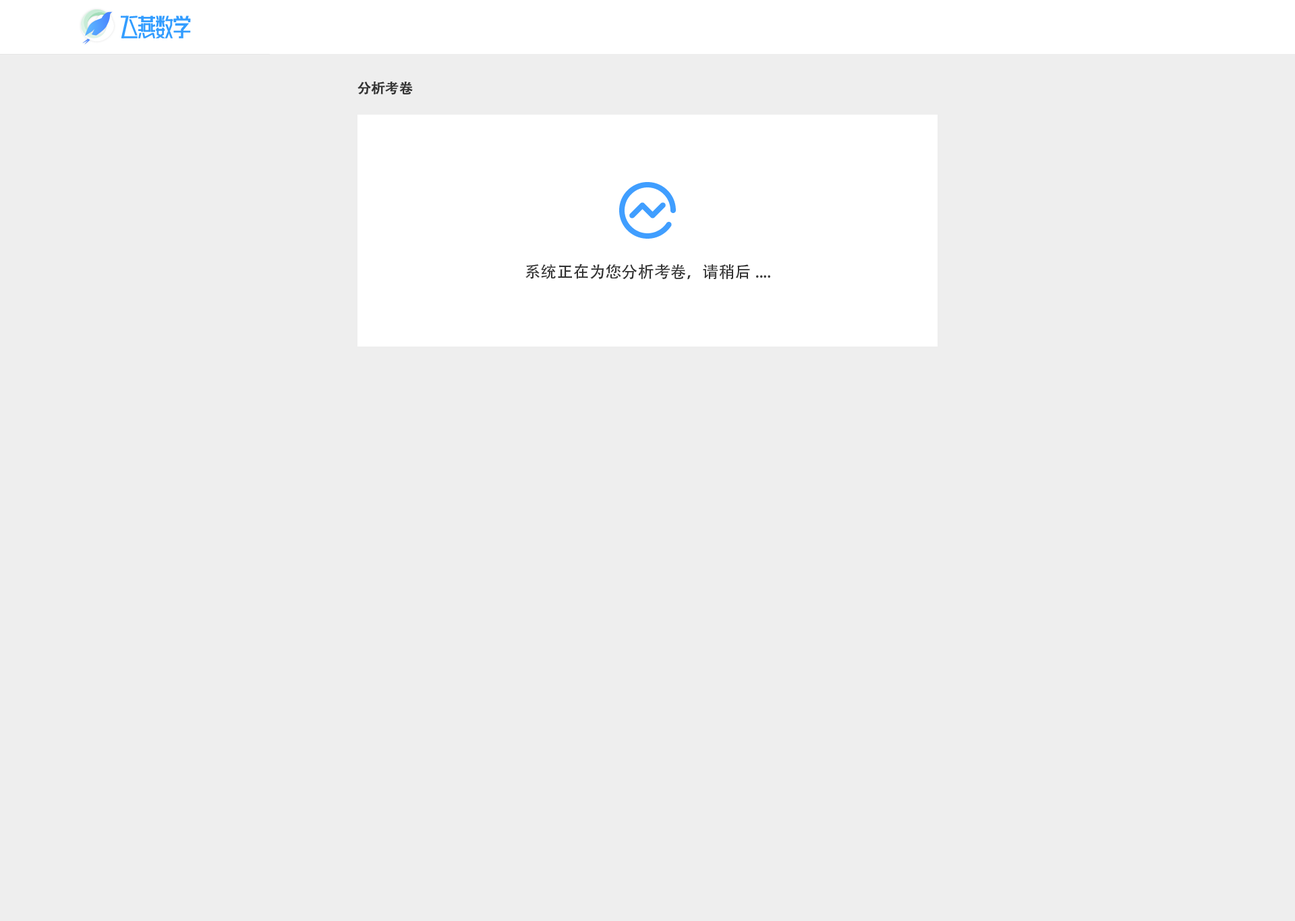
<style>
.page{position:relative;width:1295px;height:921px;background:#eeeeee}
.page>*{position:absolute;margin:0}
.t1{font:13.5px "AdobeHeitiStd-Regular";color:#333333;font-weight:bold}
.t2{font:16.2px "AdobeHeitiStd-Regular";color:#333333}
</style>
<div class="page">
<p class="t1" style="left:357px;top:81px;width:56px;height:14px">分析考卷</p>
<p class="t2" style="left:525px;top:264px;width:245px;height:16px">系统正在为您分析考卷，请稍后....</p>
</div>
